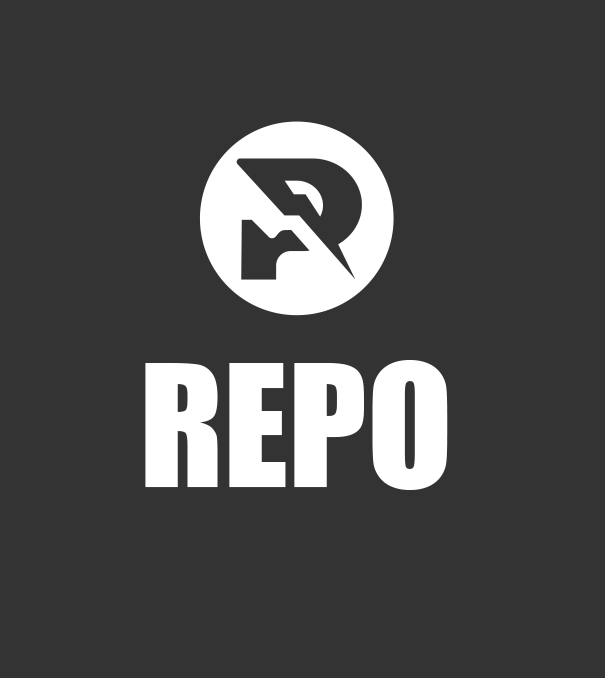
<style>
.page{position:relative;width:605px;height:678px;background:#333333}
.page>*{position:absolute;margin:0}
.t1{font:156.5px "Impact";color:#ffffff}
</style>
<div class="page">
<p class="t1" style="left:145px;top:360px;width:303px;height:130px">REPO</p>
</div>
